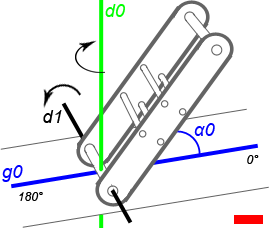
<style>
.page{position:relative;width:269px;height:228px;background:#ffffff}
.page>*{position:absolute;margin:0}
.t1{font:18px "Arial-ItalicMT";color:#00ff00}
.t2{font:18px "Arial-ItalicMT";color:#000000}
.t3{font:18px "Arial-ItalicMT";color:#0000ff}
.t4{font:12px "Arial-ItalicMT";color:#000000}
</style>
<div class="page">
<p class="t1" style="left:105px;top:4px;width:20px;height:13px">d0</p>
<p class="t2" style="left:43px;top:110px;width:19px;height:13px">d1</p>
<p class="t3" style="left:194px;top:123px;width:21px;height:13px">α0</p>
<p class="t4" style="left:247px;top:155px;width:12px;height:9px">0°</p>
<p class="t3" style="left:2px;top:165px;width:21px;height:17px">g0</p>
<p class="t4" style="left:19px;top:192px;width:24px;height:9px">180°</p>
</div>
